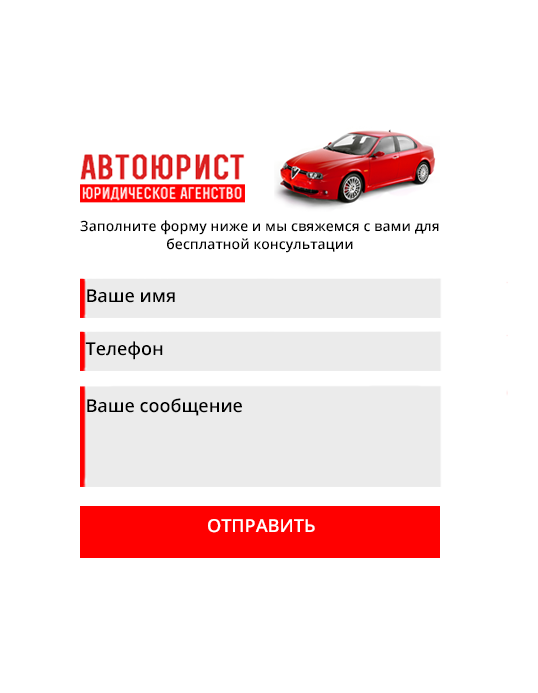
<style>
.page{position:relative;width:538px;height:693px;background:#ffffff}
.page>*{position:absolute;margin:0}
.t1{font:14px/18px "OpenSans-Semibold";color:#000000}
.t2{font:18px "OpenSans-Semibold";color:#000000}
.t3{font:18px "OpenSans-Semibold";color:#000000;text-transform:uppercase}
.t4{font:18px "OpenSans-Semibold";color:#ffffff;text-transform:uppercase}
</style>
<div class="page">
<p class="t1" style="left:80px;top:220px;width:359px;height:33px;text-align:center">Заполните форму ниже и мы свяжемся с вами для бесплатной консультации</p>
<p class="t2" style="left:87px;top:289px;width:88px;height:14px"><span class="t3">в</span>аше имя</p>
<p class="t2" style="left:85px;top:341px;width:78px;height:19px">Телефон</p>
<p class="t2" style="left:87px;top:398px;width:155px;height:18px">Ваше сообщение</p>
<p class="t4" style="left:208px;top:519px;width:107px;height:14px">отправить</p>
</div>
